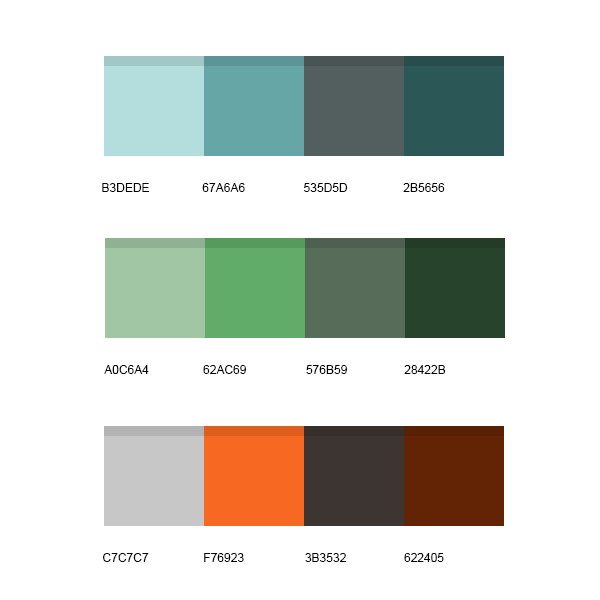
<style>
.page{position:relative;width:600px;height:600px;background:#ffffff}
.page>*{position:absolute;margin:0}
.t1{font:12px "ArialMT";color:#000000;text-transform:uppercase}
</style>
<div class="page">
<p class="t1" style="left:102px;top:183px;width:47px;height:9px">b3dede</p>
<p class="t1" style="left:202px;top:183px;width:43px;height:9px">67a6a6</p>
<p class="t1" style="left:303px;top:183px;width:45px;height:9px">535d5d</p>
<p class="t1" style="left:403px;top:183px;width:42px;height:9px">2b5656</p>
<p class="t1" style="left:104px;top:365px;width:45px;height:9px">a0c6a4</p>
<p class="t1" style="left:203px;top:365px;width:43px;height:9px">62ac69</p>
<p class="t1" style="left:306px;top:365px;width:41px;height:9px">576b59</p>
<p class="t1" style="left:404px;top:365px;width:42px;height:9px">28422b</p>
<p class="t1" style="left:103px;top:553px;width:46px;height:9px">c7c7c7</p>
<p class="t1" style="left:204px;top:553px;width:40px;height:9px">f76923</p>
<p class="t1" style="left:305px;top:553px;width:41px;height:9px">3b3532</p>
<p class="t1" style="left:404px;top:553px;width:40px;height:9px">622405</p>
</div>
